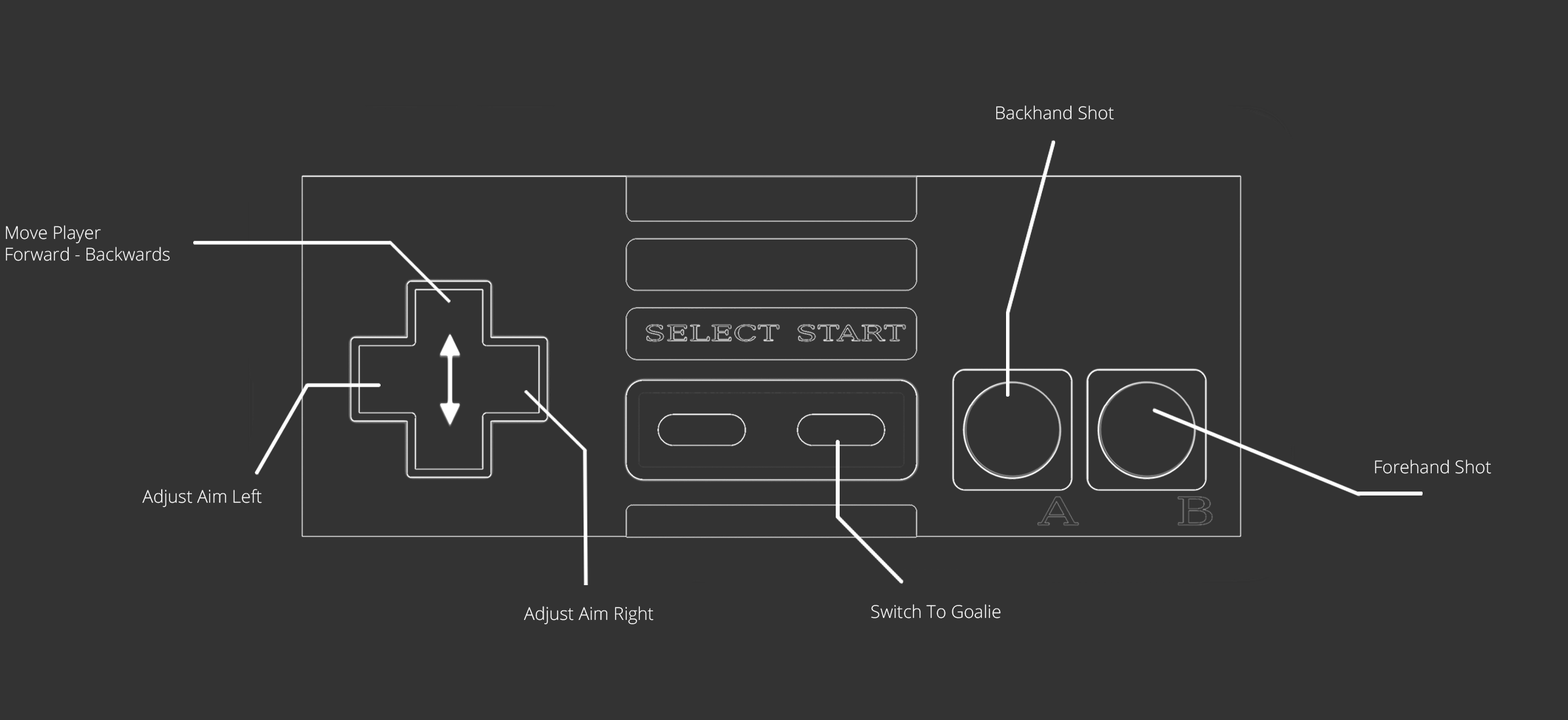
<style>
.page{position:relative;width:1568px;height:720px;background:#333333}
.page>*{position:absolute;margin:0}
.t1{font:17.7px "OpenSans-Light";color:#ffffff}
</style>
<div class="page">
<p class="t1" style="left:996px;top:105px;width:118px;height:15px">Backhand Shot</p>
<p class="t1" style="left:6px;top:225px;width:164px;height:36px">Move Player<br>Forward - Backwards</p>
<p class="t1" style="left:1375px;top:460px;width:116px;height:14px">Forehand Shot</p>
<p class="t1" style="left:142px;top:489px;width:120px;height:19px">Adjust Aim Left</p>
<p class="t1" style="left:871px;top:605px;width:130px;height:14px">Switch To Goalie</p>
<p class="t1" style="left:524px;top:607px;width:130px;height:18px">Adjust Aim Right</p>
</div>
